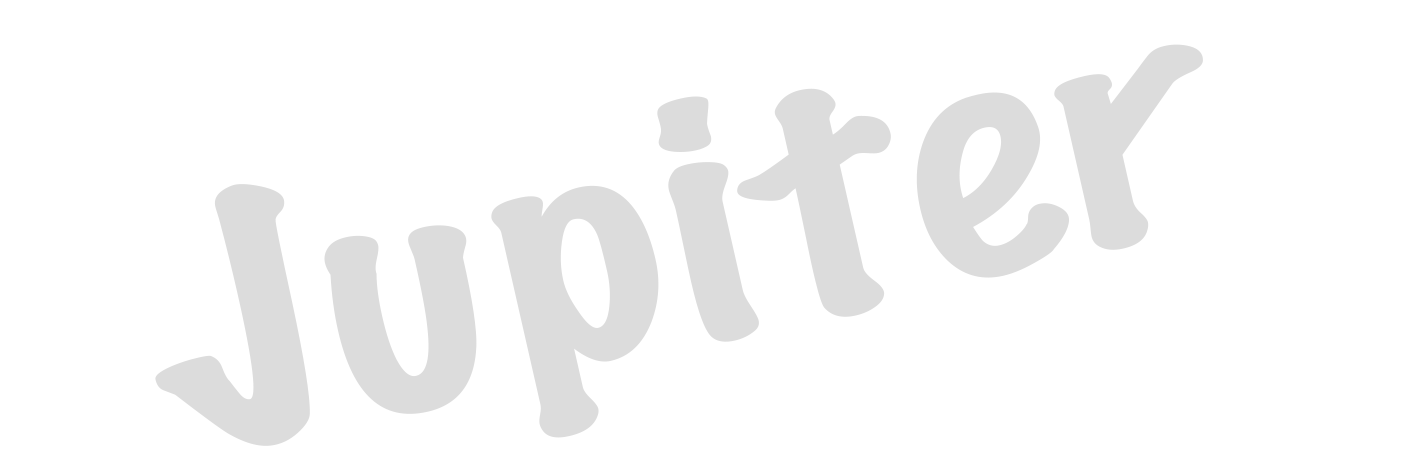
<style>
.page{position:relative;width:1417px;height:472px;background:#ffffff}
.page>*{position:absolute;margin:0}
.t1{font:309.5px "MarkerFelt-Thin";letter-spacing:0.025em;color:#dcdcdc;scale:1.28 1}
</style>
<div class="page">
<p class="t1" style="left:155px;top:44px;width:1048px;height:402px;rotate:-13deg">Jupiter</p>
</div>
